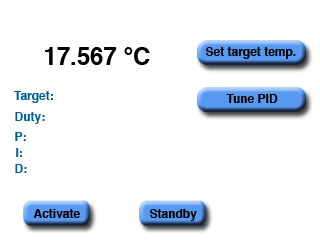
<style>
.page{position:relative;width:320px;height:240px;background:#ffffff}
.page>*{position:absolute;margin:0}
.t1{font:24px "Helvetica-Bold";color:#000000}
.t2{font:12px "Helvetica-Bold";color:#000000}
.t3{font:12px "Helvetica-Bold";color:#005e97}
</style>
<div class="page">
<p class="t1" style="left:45px;top:47px;width:105px;height:18px">17.567 °C</p>
<p class="t2" style="left:206px;top:47px;width:90px;height:12px">Set target temp.</p>
<p class="t3" style="left:14px;top:91px;width:39px;height:12px">Target:</p>
<p class="t2" style="left:226px;top:94px;width:52px;height:9px">Tune PID</p>
<p class="t3" style="left:15px;top:112px;width:30px;height:12px">Duty:</p>
<p class="t3" style="left:15px;top:132px;width:11px;height:9px">P:</p>
<p class="t3" style="left:16px;top:148px;width:6px;height:9px">I:</p>
<p class="t3" style="left:15px;top:164px;width:12px;height:9px">D:</p>
<p class="t2" style="left:33px;top:209px;width:47px;height:9px">Activate</p>
<p class="t2" style="left:150px;top:209px;width:47px;height:12px">Standby</p>
</div>
